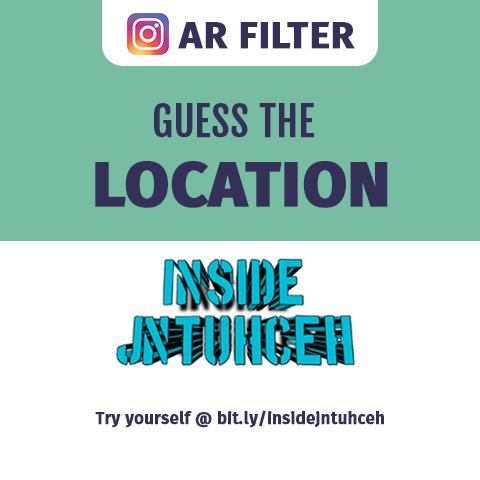
<style>
.page{position:relative;width:480px;height:480px;background:#ffffff}
.page>*{position:absolute;margin:0}
.t1{font:38.3px "FiraSans-Bold";color:#343058;font-weight:bold}
.t2{font:40px "FjallaOne";color:#343058;font-weight:bold}
.t3{font:63.5px "FiraSans-ExtraBold";color:#343058;font-weight:bold}
.t4{font:16.6px "FiraSans-Bold";color:#343058;font-weight:bold}
</style>
<div class="page">
<p class="t1" style="left:178px;top:22px;width:177px;height:27px">AR FILTER</p>
<p class="t2" style="left:154px;top:103px;width:160px;height:35px">GUESS THE</p>
<p class="t3" style="left:95px;top:161px;width:293px;height:47px">LOCATION</p>
<p class="t4" style="left:95px;top:410px;width:289px;height:18px">Try yourself @ bit.ly/insidejntuhceh</p>
</div>
